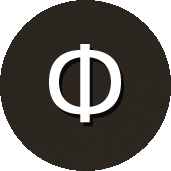
<style>
.page{position:relative;width:171px;height:171px;background:#29251f}
.page>*{position:absolute;margin:0}
.t1{font:100px "HattoriHanzo-Light";letter-spacing:-0.075em;color:#ffffff;font-weight:bold}
</style>
<div class="page">
<p class="t1" style="left:49px;top:44px;width:72px;height:79px">Ф</p>
</div>
